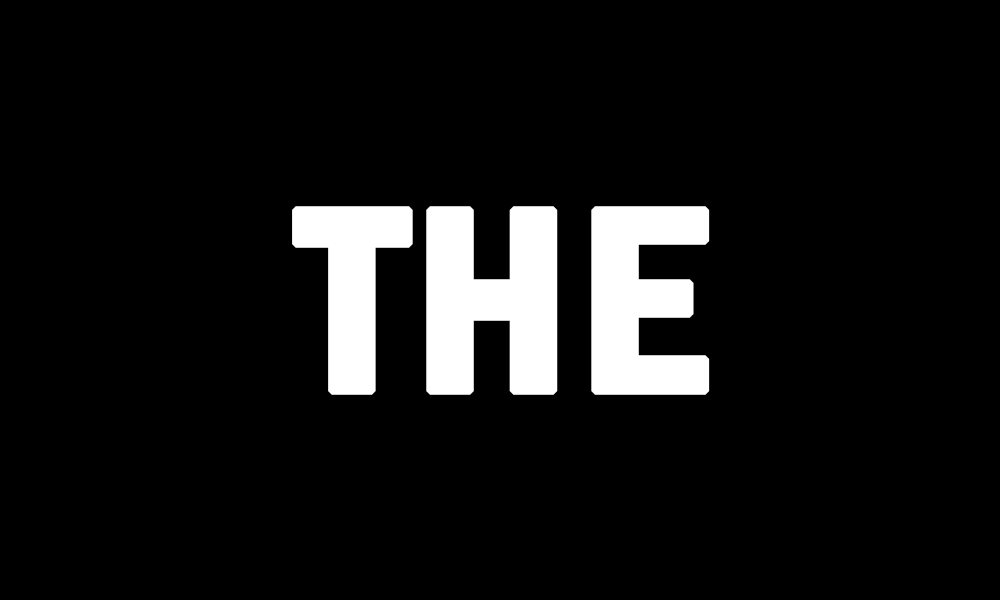
<style>
.page{position:relative;width:1000px;height:600px;background:#000000}
.page>*{position:absolute;margin:0}
.t1{font:272px "FranklinGothic-DemiCond";color:#ffffff;font-weight:bold}
</style>
<div class="page">
<p class="t1" style="left:292px;top:206px;width:418px;height:189px">THE</p>
</div>
